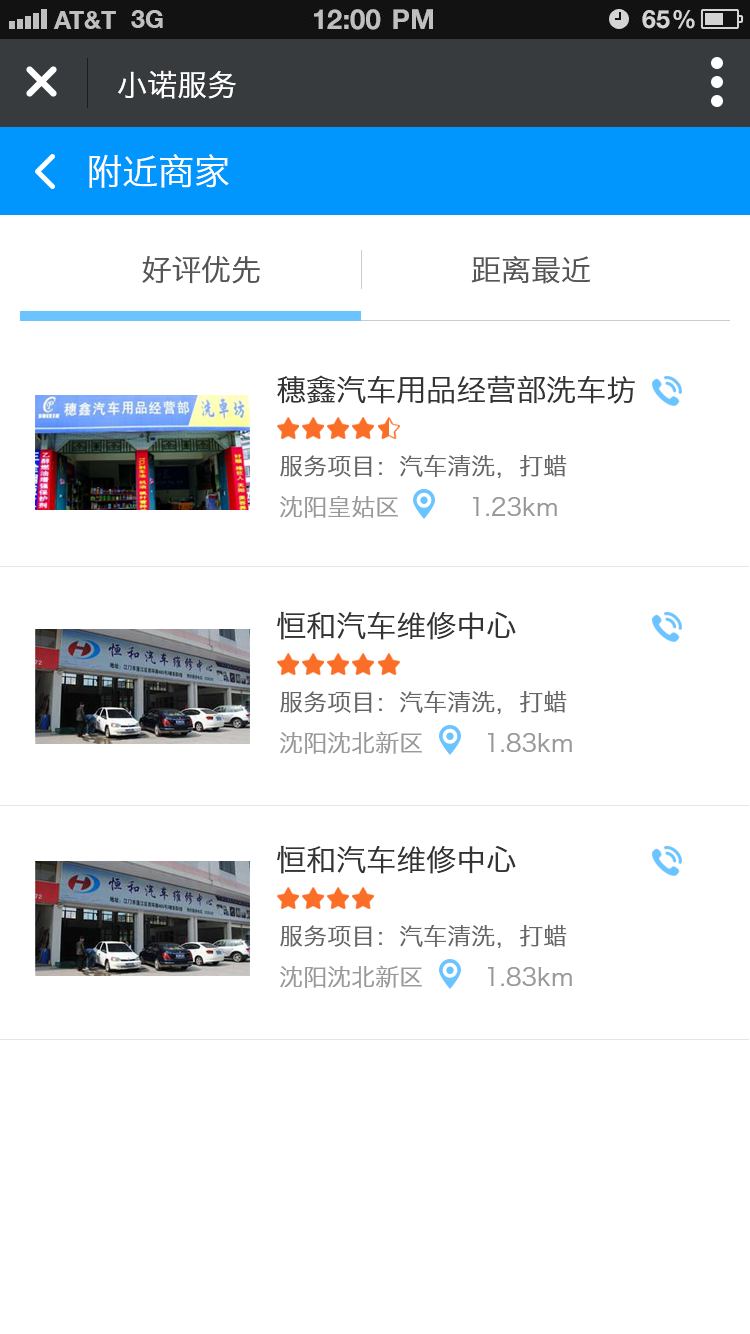
<style>
.page{position:relative;width:750px;height:1334px;background:#ffffff}
.page>*{position:absolute;margin:0}
.t1{font:30px "HiraginoSansGB-W3";color:#ffffff}
.t2{font:36px "HiraginoSansGB-W3";color:#ffffff}
.t3{font:30px "HiraginoSansGB-W3";color:#555555}
.t4{font:30px "HiraginoSansGB-W3";color:#333333}
.t5{font:24px "HiraginoSansGB-W3";color:#666666}
.t6{font:24px "HiraginoSansGB-W3";color:#999999}
</style>
<div class="page">
<p class="t1" style="left:118px;top:70px;width:118px;height:29px">小诺服务</p>
<p class="t2" style="left:89px;top:154px;width:140px;height:34px">附近商家</p>
<p class="t3" style="left:142px;top:255px;width:449px;height:29px">好评优先                     距离最近</p>
<p class="t4" style="left:277px;top:375px;width:358px;height:29px">穗鑫汽车用品经营部洗车坊</p>
<p class="t5" style="left:280px;top:454px;width:287px;height:24px">服务项目：汽车清洗，打蜡</p>
<p class="t6" style="left:280px;top:495px;width:118px;height:23px">沈阳皇姑区</p>
<p class="t6" style="left:473px;top:497px;width:84px;height:20px">1.23km</p>
<p class="t4" style="left:277px;top:611px;width:239px;height:29px">恒和汽车维修中心</p>
<p class="t5" style="left:280px;top:690px;width:287px;height:24px">服务项目：汽车清洗，打蜡</p>
<p class="t6" style="left:280px;top:731px;width:142px;height:23px">沈阳沈北新区</p>
<p class="t6" style="left:488px;top:733px;width:84px;height:19px">1.83km</p>
<p class="t4" style="left:277px;top:845px;width:239px;height:29px">恒和汽车维修中心</p>
<p class="t5" style="left:280px;top:924px;width:287px;height:24px">服务项目：汽车清洗，打蜡</p>
<p class="t6" style="left:280px;top:965px;width:142px;height:23px">沈阳沈北新区</p>
<p class="t6" style="left:488px;top:967px;width:84px;height:19px">1.83km</p>
</div>
